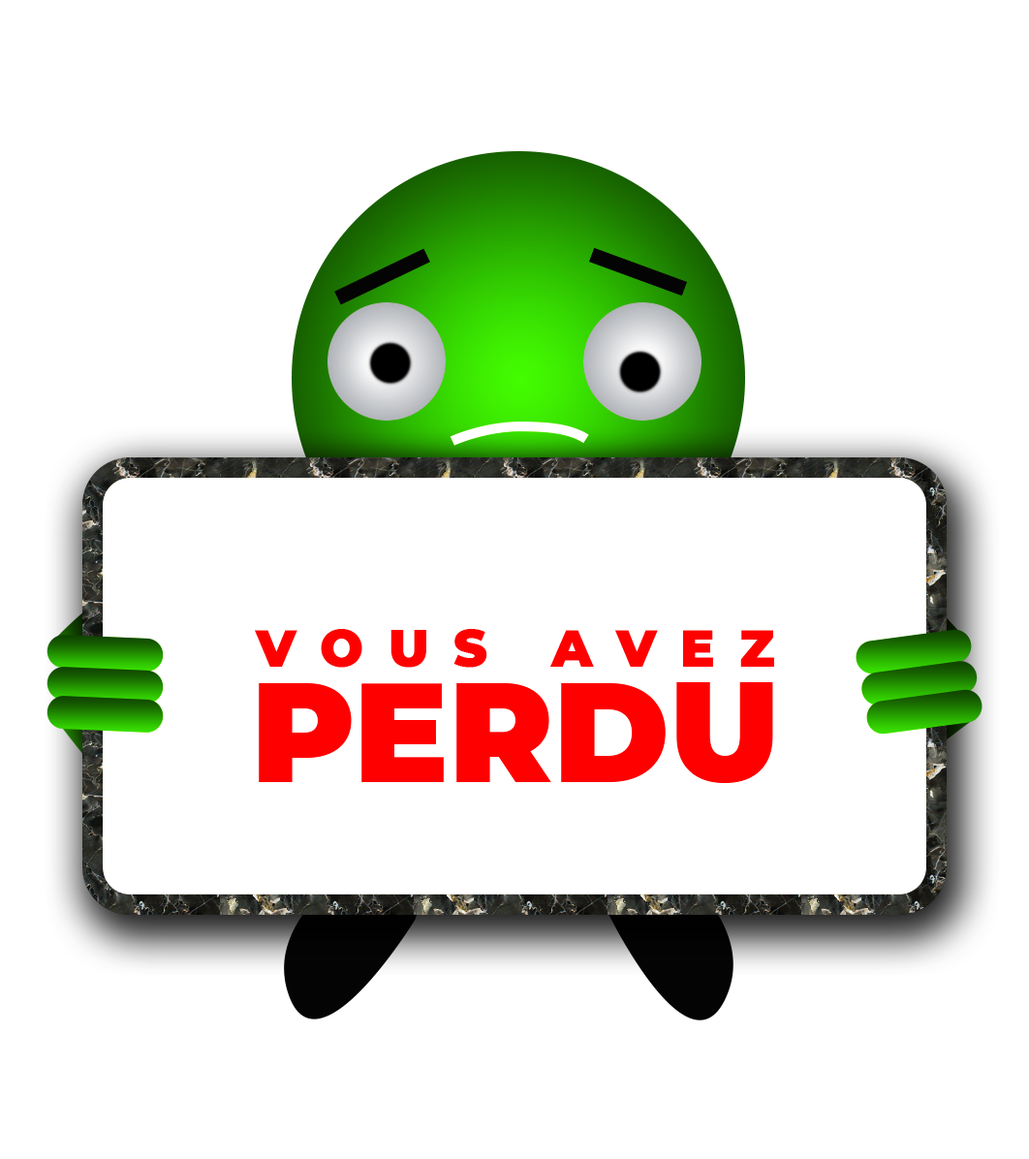
<style>
.page{position:relative;width:1029px;height:1159px;background:#ffffff}
.page>*{position:absolute;margin:0}
.t1{font:88.2px/125.8px "Montserrat-Black";letter-spacing:0.48em;color:#ff0000;text-transform:uppercase}
.t2{font:241.3px/166.2px "Montserrat-Black";color:#ff0000;text-transform:uppercase}
</style>
<div class="page">
<p class="t1" style="left:255px;top:629px;width:519px;height:154px;text-align:center">Vous avez<br><span class="t2">PERDU</span></p>
</div>
